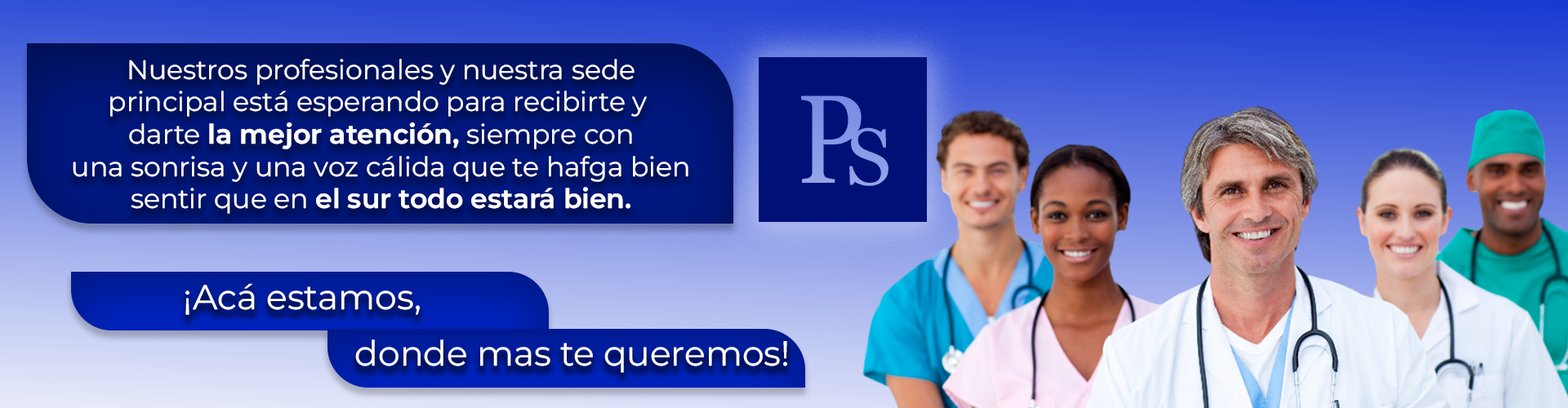
<style>
.page{position:relative;width:1568px;height:408px}
.page>*{position:absolute;margin:0}
.t1{font:27px "MontserratThin-Regular";color:#ffffff}
.t2{font:27px "MontserratThin_656.000wght";color:#ffffff}
.t3{font:27px "MontserratThin_615.000wght";color:#ffffff}
.t4{font:34.6px "MontserratThin-Regular";color:#ffffff}
</style>
<div class="page">
<p class="t1" style="left:73px;top:59px;width:615px;height:155px;text-align:center">Nuestros profesionales y nuestra sede<br>principal está esperando para recibirte y <br>darte <span class="t2">la mejor atención,</span> siempre con<br>una sonrisa y una voz cálida que te hafga bien<br>sentir que en <span class="t3">el sur todo estará bien.</span></p>
<p class="t4" style="left:185px;top:283px;width:235px;height:32px">¡Acá estamos,</p>
<p class="t4" style="left:355px;top:340px;width:432px;height:33px">donde mas te queremos!</p>
</div>
